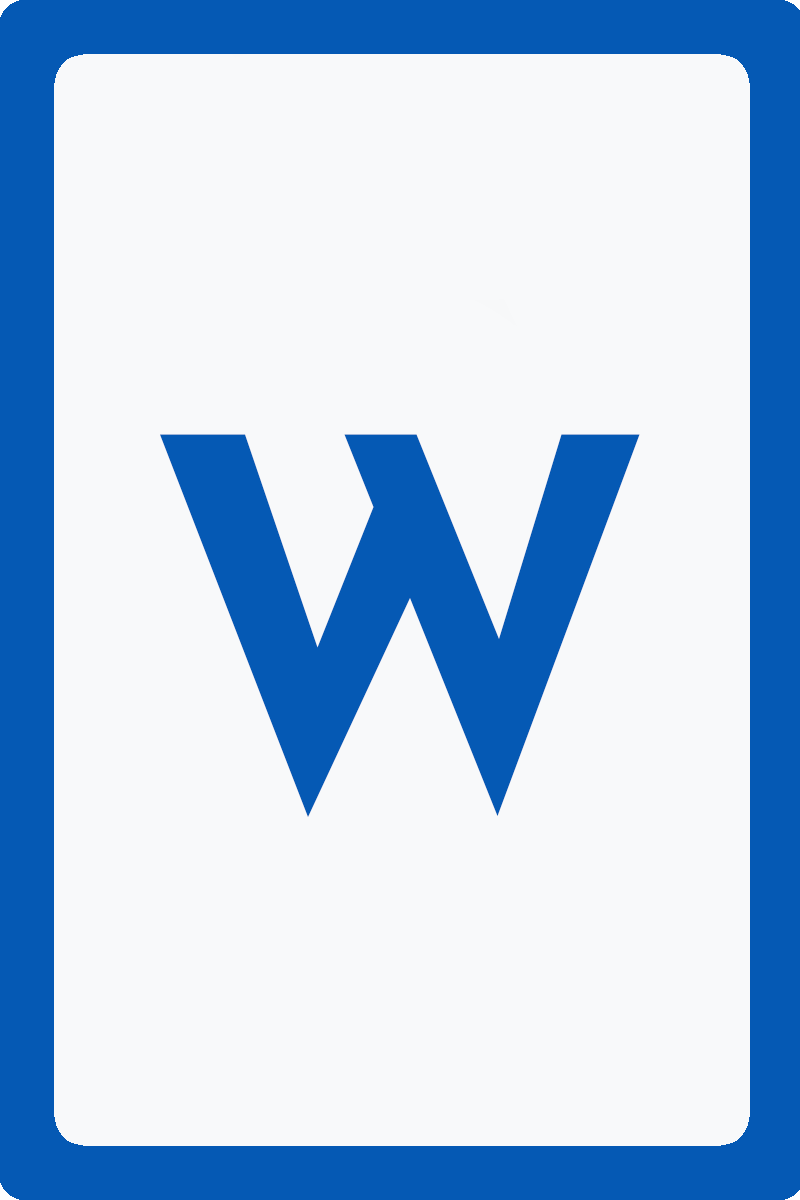
<style>
.page{position:relative;width:800px;height:1200px;background:#f8f9fa}
.page>*{position:absolute;margin:0}
.t1{font:500px "JosefinSans-Bold";color:#0559b4}
</style>
<div class="page">
<p class="t1" style="left:160px;top:434px;width:480px;height:383px">W</p>
</div>
